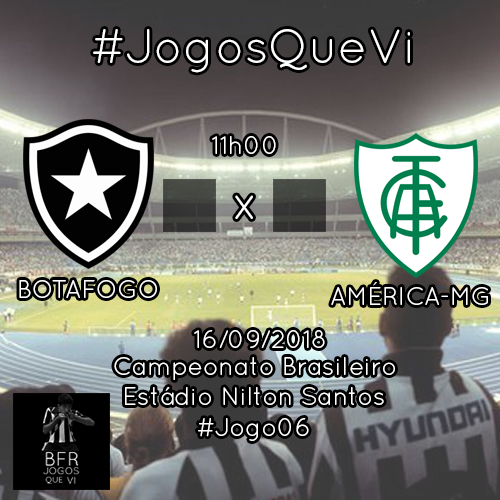
<style>
.page{position:relative;width:500px;height:500px}
.page>*{position:absolute;margin:0}
.t1{font:48px "QuicksandBook-Regular";color:#ffffff}
.t2{font:25px "QuicksandBook-Regular";color:#ffffff}
</style>
<div class="page">
<p class="t1" style="left:93px;top:29px;width:317px;height:44px">#JogosQueVi</p>
<p class="t2" style="left:212px;top:136px;width:64px;height:18px">11h00</p>
<p class="t1" style="left:235px;top:195px;width:18px;height:24px">x</p>
<p class="t2" style="left:19px;top:280px;width:138px;height:18px">BOTAFOGO</p>
<p class="t2" style="left:331px;top:282px;width:157px;height:23px">AMÉRICA-MG</p>
<p class="t2" style="left:194px;top:330px;width:131px;height:18px">16/09/2018</p>
<p class="t2" style="left:114px;top:357px;width:281px;height:23px">Campeonato Brasileiro</p>
<p class="t2" style="left:125px;top:387px;width:259px;height:18px">Estádio Nilton Santos</p>
<p class="t2" style="left:198px;top:418px;width:111px;height:23px">#Jogo06</p>
</div>
